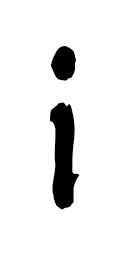
<style>
.page{position:relative;width:128px;height:256px;background:#ffffff}
.page>*{position:absolute;margin:0}
.t1{font:250px "AB-fudeshichi";letter-spacing:0.42em;color:#000000;scale:0.7 1}
</style>
<div class="page">
<p class="t1" style="left:50px;top:46px;width:30px;height:164px">i</p>
</div>
